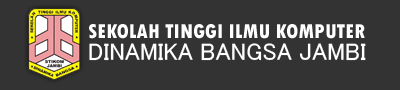
<style>
.page{position:relative;width:400px;height:90px;background:#333333}
.page>*{position:absolute;margin:0}
.t1{font:21px "TwCenMT-CondensedExtraBold";color:#ffffff}
.t2{font:23.9px "MS-UIGothic";color:#ffffff}
</style>
<div class="page">
<p class="t1" style="left:89px;top:24px;width:276px;height:15px">SEKOLAH TINGGI ILMU KOMPUTER</p>
<p class="t2" style="left:89px;top:43px;width:277px;height:18px">DINAMIKA BANGSA JAMBI</p>
</div>
